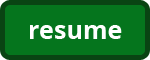
<style>
.page{position:relative;width:150px;height:60px;background:#05751d}
.page>*{position:absolute;margin:0}
.t1{font:25px "OpenSans-Bold";color:#ffffff}
</style>
<div class="page">
<p class="t1" style="left:30px;top:25px;width:92px;height:14px">resume</p>
</div>
